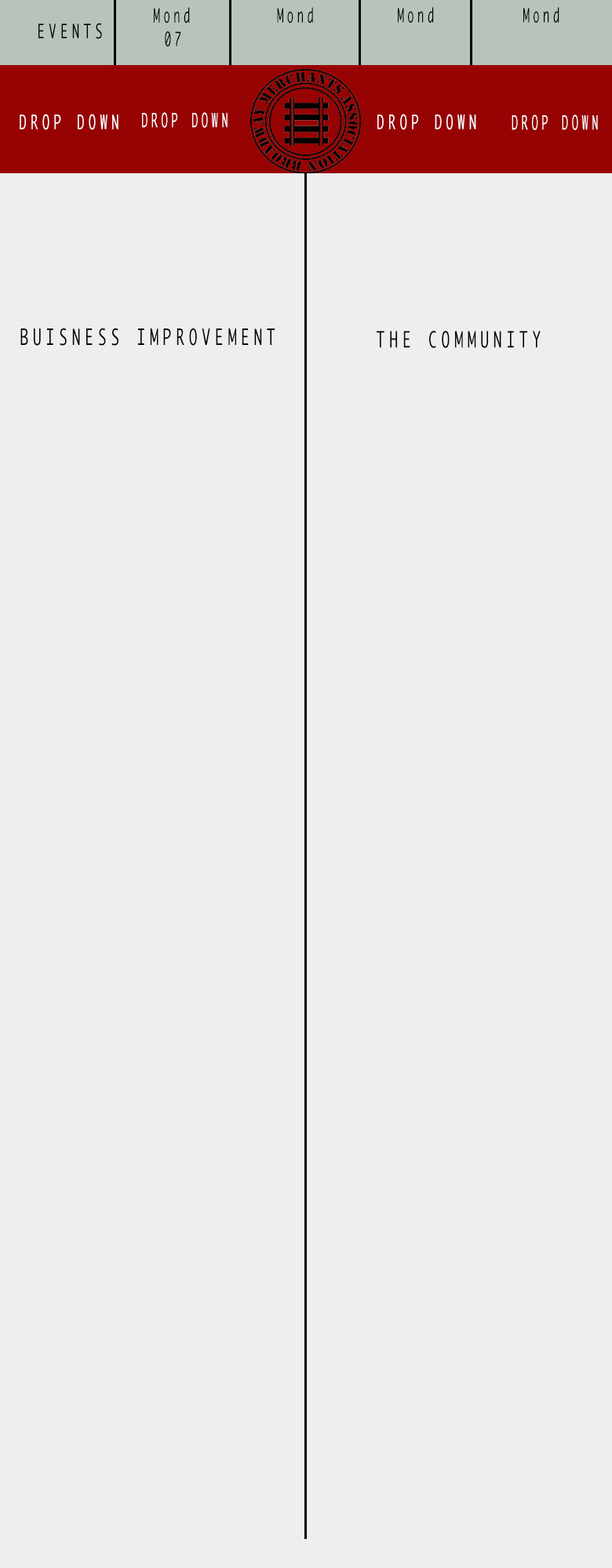
<style>
.page{position:relative;width:612px;height:1568px;background:#eeeeee}
.page>*{position:absolute;margin:0}
.t1{font:19.1px "Monaco";letter-spacing:0.32em;color:#000000;scale:0.57 1}
.t2{font:19.1px "Monaco";letter-spacing:0.32em;color:#000000;scale:0.66 1}
.t3{font:19.1px "Monaco";letter-spacing:0.32em;color:#ffffff;scale:0.66 1}
.t4{font:19.1px "Monaco";letter-spacing:0.32em;color:#ffffff;scale:0.57 1}
.t5{font:21.5px "Monaco";letter-spacing:0.32em;color:#000000;scale:0.66 1}
</style>
<div class="page">
<p class="t1" style="left:154px;top:7px;width:36px;height:17px">Mond</p>
<p class="t1" style="left:277px;top:7px;width:36px;height:17px">Mond</p>
<p class="t1" style="left:397px;top:7px;width:37px;height:16px">Mond</p>
<p class="t1" style="left:523px;top:7px;width:36px;height:16px">Mond</p>
<p class="t2" style="left:38px;top:23px;width:64px;height:16px">EVENTS</p>
<p class="t1" style="left:165px;top:31px;width:16px;height:16px">07</p>
<p class="t3" style="left:20px;top:114px;width:98px;height:16px">DROP DOWN</p>
<p class="t4" style="left:142px;top:112px;width:85px;height:16px">DROP DOWN</p>
<p class="t3" style="left:377px;top:114px;width:99px;height:16px">DROP DOWN</p>
<p class="t4" style="left:511px;top:114px;width:86px;height:16px">DROP DOWN</p>
<p class="t5" style="left:20px;top:328px;width:254px;height:18px">BUISNESS IMPROVEMENT</p>
<p class="t5" style="left:376px;top:331px;width:164px;height:17px">THE COMMUNITY</p>
</div>
